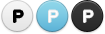
<style>
.page{position:relative;width:105px;height:34px;background:#ffffff}
.page>*{position:absolute;margin:0}
.t1{font:16px "ArialUnicodeMS";color:#000000}
.t2{font:16px "ArialUnicodeMS";color:#ffffff}
</style>
<div class="page">
<p class="t1" style="left:14px;top:10px;width:9px;height:12px">P</p>
<p class="t2" style="left:49px;top:10px;width:9px;height:12px">P</p>
<p class="t2" style="left:84px;top:10px;width:9px;height:12px">P</p>
</div>
